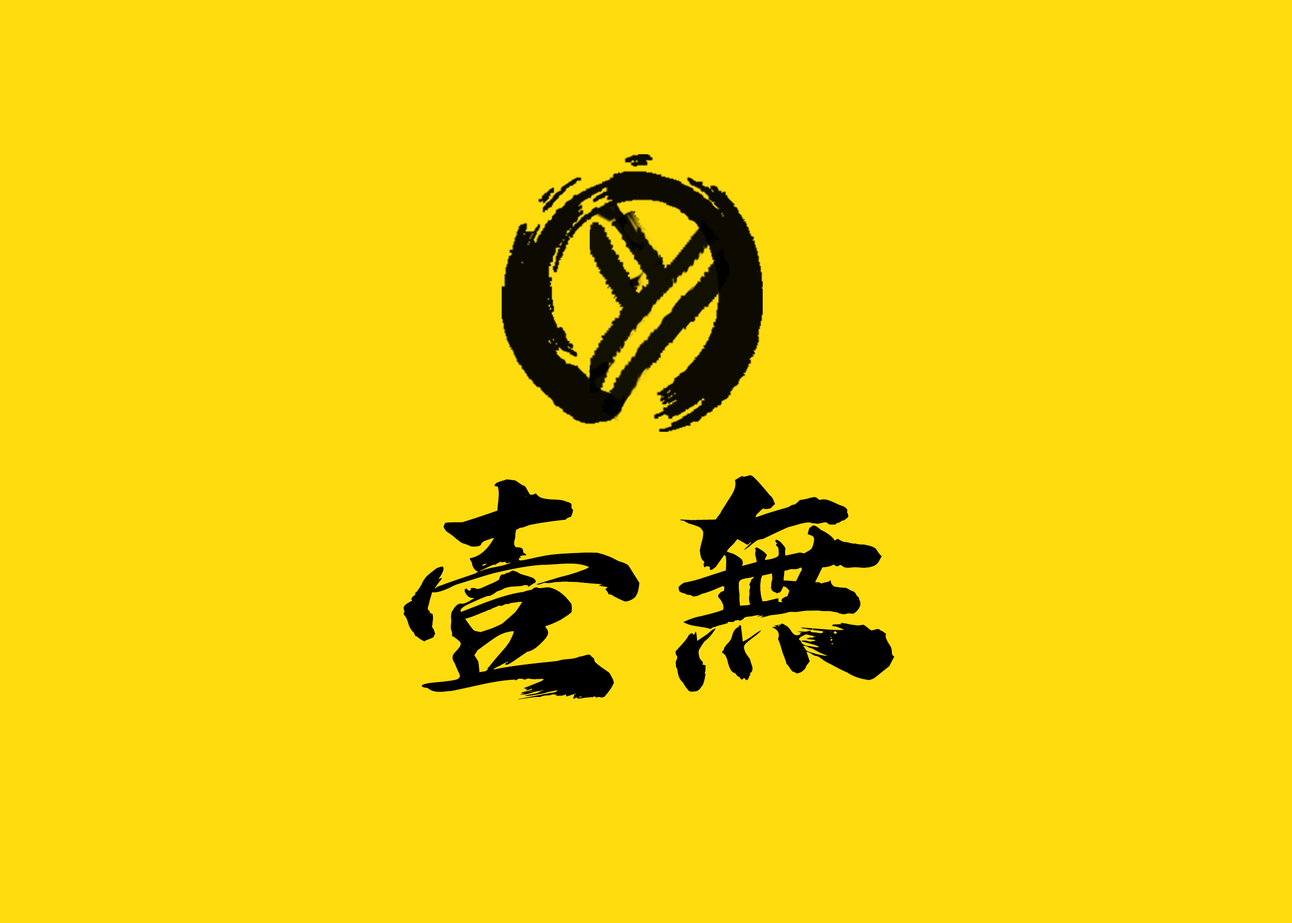
<style>
.page{position:relative;width:1292px;height:923px;background:#ffdc0e}
.page>*{position:absolute;margin:0}
.t1{font:253px "iFontshangtiantengfeiti";letter-spacing:-0.05em;color:#000000;text-transform:uppercase;scale:1.11 1}
</style>
<div class="page">
<p class="t1" style="left:403px;top:475px;width:491px;height:225px;rotate:-2deg">壹無</p>
</div>
